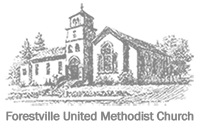
<style>
.page{position:relative;width:199px;height:125px;background:#ffffff}
.page>*{position:absolute;margin:0}
.t1{font:12.4px "FranklinGothic-Book";letter-spacing:-0.02em;color:#838383;font-weight:bold}
</style>
<div class="page">
<p class="t1" style="left:6px;top:111px;width:188px;height:10px">Forestville United Methodist Church</p>
</div>
